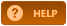
<style>
.page{position:relative;width:67px;height:26px}
.page>*{position:absolute;margin:0}
.t1{font:10px "SegoeUI-Bold";color:#ffc185}
</style>
<div class="page">
<p class="t1" style="left:33px;top:9px;width:25px;height:9px">HELP</p>
</div>
